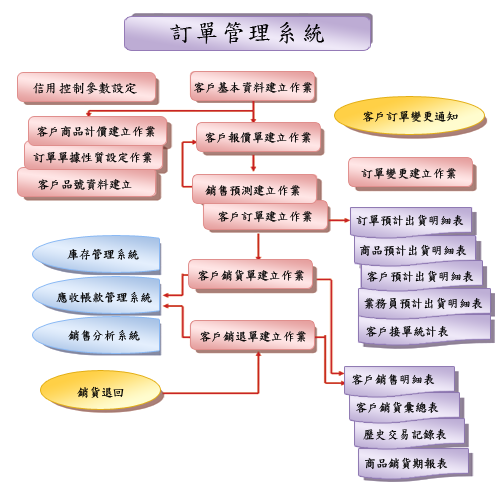
<style>
.page{position:relative;width:495px;height:500px;background:#ffffff}
.page>*{position:absolute;margin:0}
.t1{font:24px "DFKaiShu-SB-Estd-BF";letter-spacing:0.1em;color:#000000}
.t2{font:13px "DFKaiShu-SB-Estd-BF";color:#000000}
.t3{font:12px "DFKaiShu-SB-Estd-BF";color:#000000}
.t4{font:12px "DFKaiShu-SB-Estd-BF"}
</style>
<div class="page">
<p class="t1" style="left:170px;top:22px;width:154px;height:22px">訂單管理系統</p>
<p class="t2" style="left:33px;top:82px;width:104px;height:13px">信用控制參數設定</p>
<p class="t3" style="left:194px;top:81px;width:118px;height:12px">客戶基本資料建立作業</p>
<p class="t3" style="left:363px;top:110px;width:95px;height:13px">客戶訂單變更通知</p>
<p class="t3" style="left:37px;top:126px;width:118px;height:11px">客戶商品計價建立作業</p>
<p class="t3" style="left:205px;top:131px;width:106px;height:13px">客戶報價單建立作業</p>
<p class="t3" style="left:33px;top:151px;width:119px;height:13px">訂單單據性質設定作業</p>
<p class="t3" style="left:361px;top:167px;width:95px;height:13px">訂單變更建立作業</p>
<p class="t3" style="left:38px;top:179px;width:94px;height:11px">客戶品號資料建立</p>
<p class="t3" style="left:205px;top:185px;width:95px;height:11px">銷售預測建立作業</p>
<p class="t3" style="left:218px;top:210px;width:94px;height:13px">客戶訂單建立作業</p>
<p class="t3" style="left:356px;top:214px;width:108px;height:13px">訂單預計出貨明細表</p>
<p class="t3" style="left:360px;top:244px;width:107px;height:12px">商品預計出貨明細表</p>
<p class="t3" style="left:67px;top:249px;width:72px;height:11px">庫存管理系統</p>
<p class="t3" style="left:198px;top:269px;width:106px;height:13px">客戶銷貨單建立作業</p>
<p class="t3" style="left:367px;top:270px;width:107px;height:12px">客戶預計出貨明細表</p>
<p class="t3" style="left:56px;top:292px;width:96px;height:11px">應收帳款管理系統</p>
<p class="t3" style="left:364px;top:297px;width:119px;height:12px">業務員預計出貨明細表</p>
<p class="t3" style="left:366px;top:325px;width:83px;height:13px">客戶接單統計表</p>
<p class="t3" style="left:68px;top:330px;width:72px;height:11px">銷售分析系統</p>
<p class="t3" style="left:200px;top:330px;width:106px;height:13px">客戶銷退單建立作業</p>
<p class="t3" style="left:352px;top:374px;width:83px;height:11px">客戶銷售明細表</p>
<p class="t3" style="left:77px;top:386px;width:47px;height:12px">銷貨退回</p>
<p class="t3" style="left:356px;top:401px;width:83px;height:12px">客戶銷貨彙總表</p>
<p class="t3" style="left:363px;top:429px;width:84px;height:11px">歷史交易記錄表</p>
<p class="t4" style="left:365px;top:457px;width:83px;height:12px">商品銷貨期報表</p>
</div>
